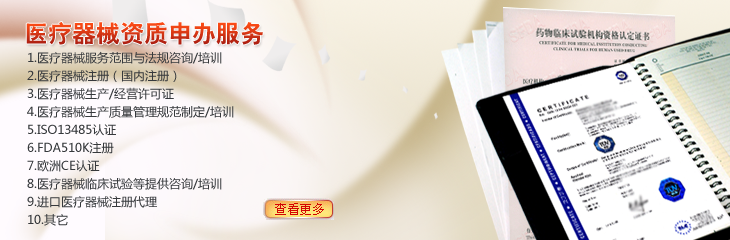
<style>
.page{position:relative;width:730px;height:240px}
.page>*{position:absolute;margin:0}
.t1{font:24px "HYb2gj"}
.t2{font:12px/18px "MicrosoftYaHei";color:#36393c}
</style>
<div class="page">
<p class="t1" style="left:26px;top:22px;width:237px;height:23px">医疗器械资质申办服务</p>
<p class="t2" style="left:27px;top:51px;width:207px;height:175px">1.医疗器械服务范围与法规咨询/培训<br>2.医疗器械注册（国内注册）<br>3.医疗器械生产/经营许可证<br>4.医疗器械生产质量管理规范制定/培训<br>5.ISO13485认证<br>6.FDA510K注册<br>7.欧洲CE认证<br>8.医疗器械临床试验等提供咨询/培训<br>9.进口医疗器械注册代理<br>10.其它</p>
</div>
